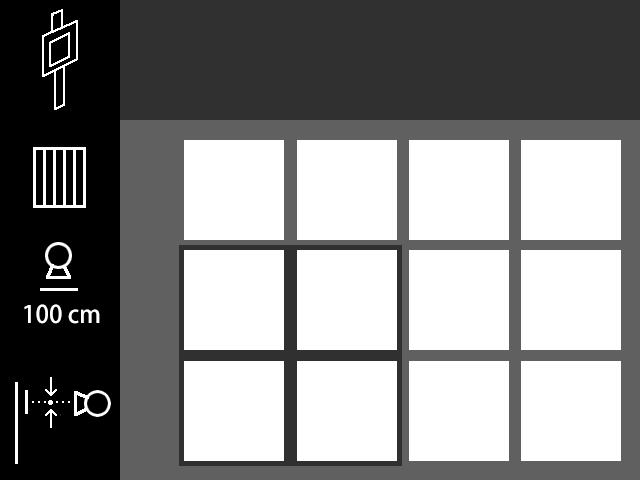
<style>
.page{position:relative;width:640px;height:480px;background:#ffffff}
.page>*{position:absolute;margin:0}
.t1{font:24px "AdobeHeitiStd-Regular";color:#ffffff}
</style>
<div class="page">
<p class="t1" style="left:24px;top:304px;width:76px;height:20px">100 cm</p>
</div>
